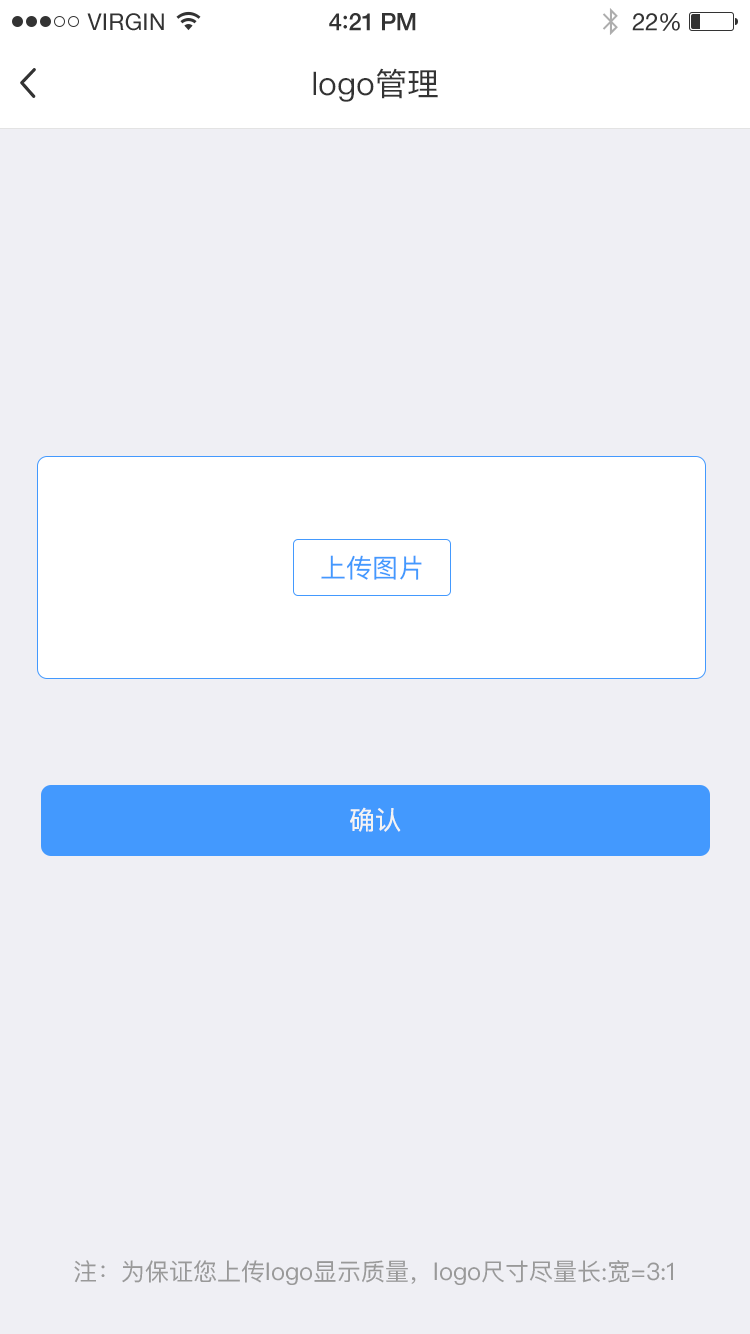
<style>
.page{position:relative;width:750px;height:1334px;background:#efeff4}
.page>*{position:absolute;margin:0}
.t1{font:32px "PingFangSC-Regular";color:#333333}
.t2{font:26px "PingFangSC-Regular";color:#4399fe}
.t3{font:26px "PingFangSC-Regular";color:#f3f3f3}
.t4{font:24px "PingFangSC-Regular";color:#999999}
</style>
<div class="page">
<p class="t1" style="left:313px;top:68px;width:125px;height:34px">logo管理</p>
<p class="t2" style="left:321px;top:555px;width:101px;height:25px">上传图片</p>
<p class="t3" style="left:350px;top:807px;width:51px;height:25px">确认</p>
<p class="t4" style="left:74px;top:1260px;width:599px;height:25px">注：为保证您上传logo显示质量，logo尺寸尽量长:宽=3:1</p>
</div>
